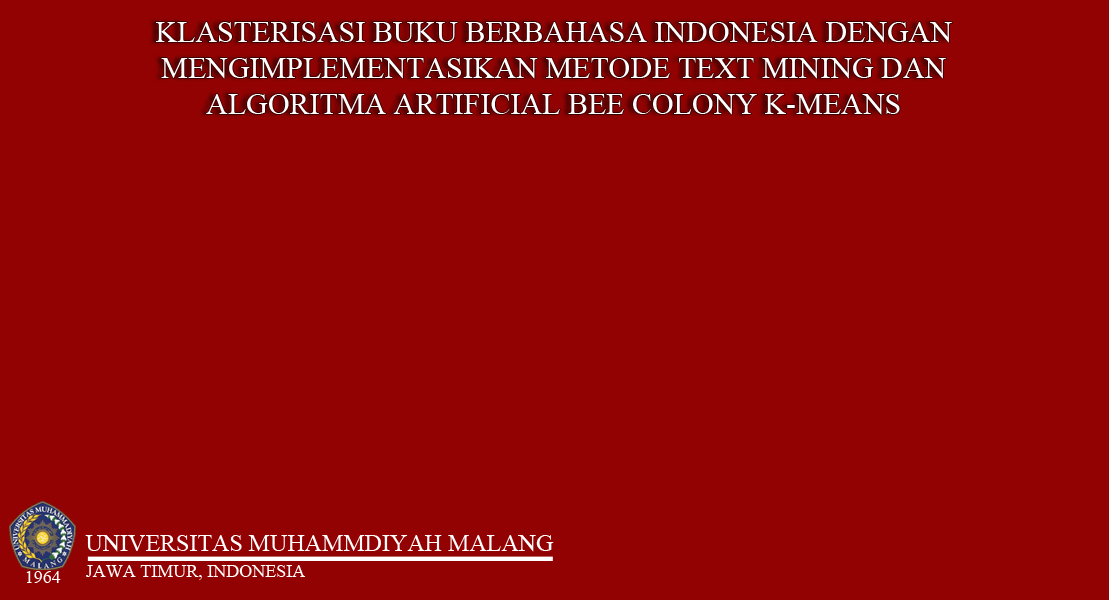
<style>
.page{position:relative;width:1109px;height:600px;background:#930202}
.page>*{position:absolute;margin:0}
.t1{font:30px "TimesNewRomanPSMT";color:#ffffff}
.t2{font:24px "TimesNewRomanPSMT";color:#ffffff}
.t3{font:18px "TimesNewRomanPSMT";color:#ffffff}
</style>
<div class="page">
<p class="t1" style="left:156px;top:22px;width:796px;height:93px;text-align:center">KLASTERISASI BUKU BERBAHASA INDONESIA DENGAN<br>MENGIMPLEMENTASIKAN METODE TEXT MINING DAN<br>ALGORITMA ARTIFICIAL BEE COLONY K-MEANS</p>
<p class="t2" style="left:85px;top:535px;width:469px;height:17px">UNIVERSITAS MUHAMMDIYAH MALANG</p>
<p class="t3" style="left:86px;top:565px;width:220px;height:15px">JAWA TIMUR, INDONESIA</p>
<p class="t3" style="left:26px;top:571px;width:35px;height:12px">1964</p>
</div>
